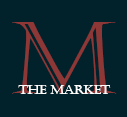
<style>
.page{position:relative;width:127px;height:117px;background:#01222a}
.page>*{position:absolute;margin:0}
.t1{font:100px "Castellar";color:#8d3737}
.t2{font:12.5px "Castellar";color:#ffffff}
</style>
<div class="page">
<p class="t1" style="left:12px;top:22px;width:105px;height:72px">M</p>
<p class="t2" style="left:18px;top:85px;width:93px;height:9px">THE MARKET</p>
</div>
